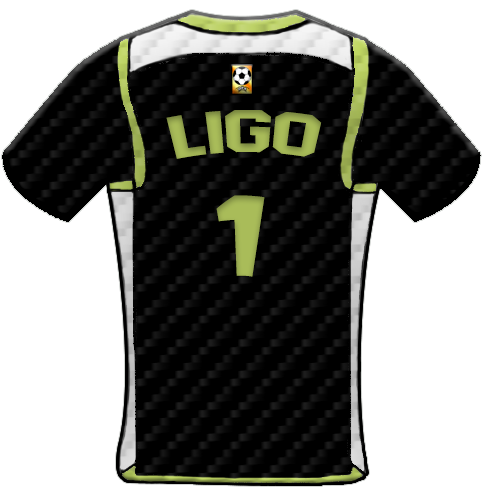
<style>
.page{position:relative;width:482px;height:494px;background:#ffffff}
.page>*{position:absolute;margin:0}
.t1{font:59.4px "AdidasHalfBlock2016";color:#a9bc59;scale:1.13 1}
.t2{font:113.8px "AdidasHalfBlock2016";color:#a9bc59}
</style>
<div class="page">
<p class="t1" style="left:166px;top:110px;width:156px;height:49px">Ligo</p>
<p class="t2" style="left:216px;top:195px;width:49px;height:82px">1</p>
</div>
